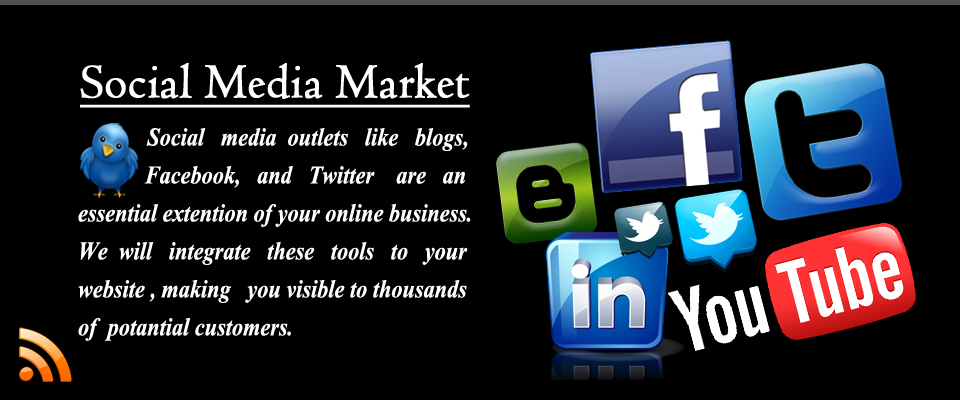
<style>
.page{position:relative;width:960px;height:400px;background:#000000}
.page>*{position:absolute;margin:0}
.t1{font:50.4px "Centaur";color:#ffffff;font-weight:bold;text-decoration:underline;scale:0.95 1}
.t2{font:31.6px "Vijaya-Bold";color:#ffffff;scale:0.87 1}
.t3{font:39.4px "Vijaya-Bold";color:#ffffff;scale:0.87 1}
</style>
<div class="page">
<p class="t1" style="left:80px;top:63px;width:390px;height:45px">Social Media Market</p>
<p class="t2" style="left:78px;top:128px;width:393px;height:213px"><span class="t3">          </span>Social   media  outlets   like   blogs, <br>            Facebook,   and   Twitter    are   an <br>essential extention of your online business. <br>We  will   integrate   these   tools   to   your<br>website , making   you visible to thousands <br>of  potantial customers.</p>
</div>
